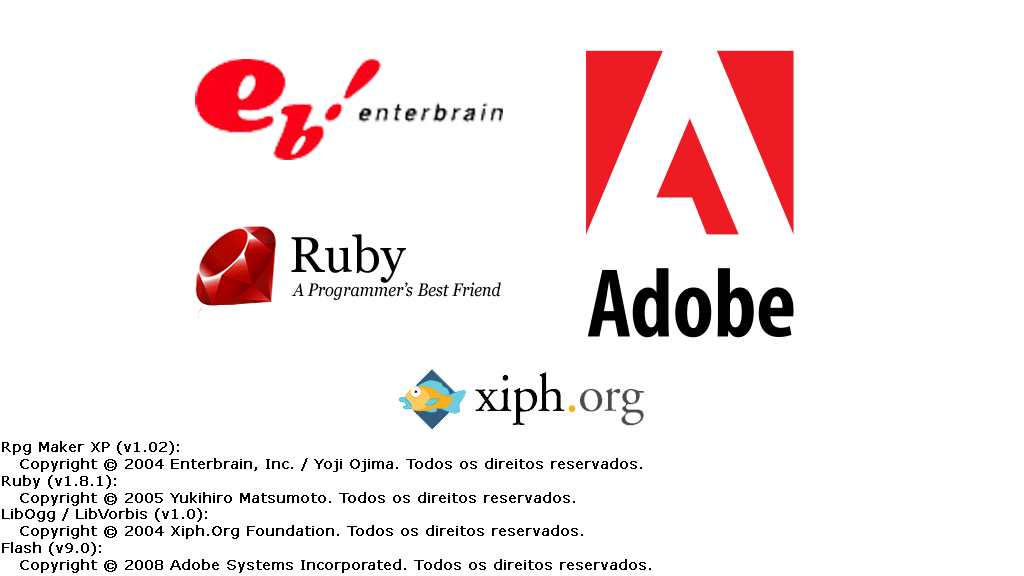
<style>
.page{position:relative;width:1024px;height:576px;background:#ffffff}
.page>*{position:absolute;margin:0}
.t1{font:14px "Verdana";color:#000000;font-weight:bold}
</style>
<div class="page">
<p class="t1" style="left:2px;top:441px;width:649px;height:132px">Rpg Maker XP (v1.02):<br>   Copyright © 2004 Enterbrain, Inc. / Yoji Ojima. Todos os direitos reservados.<br>Ruby (v1.8.1):<br>   Copyright © 2005 Yukihiro Matsumoto. Todos os direitos reservados.<br>LibOgg / LibVorbis (v1.0):<br>   Copyright © 2004 Xiph.Org Foundation. Todos os direitos reservados.<br>Flash (v9.0):<br>   Copyright © 2008 Adobe Systems Incorporated. Todos os direitos reservados.</p>
</div>
